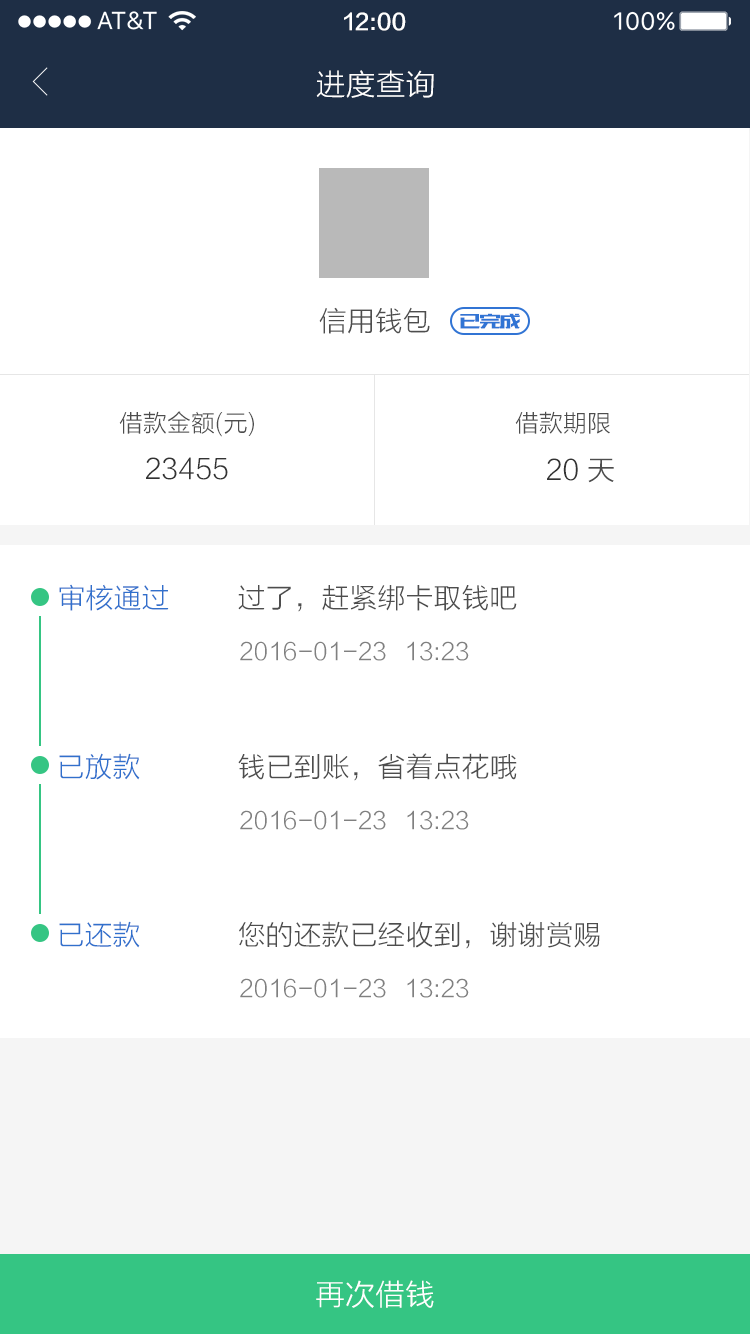
<style>
.page{position:relative;width:750px;height:1334px;background:#ffffff}
.page>*{position:absolute;margin:0}
.t1{font:22px "FZLTZHK--GBK1-0";color:#ffffff}
.t2{font:30px "FZLTXHK";color:#ffffff}
.t3{font:28px "FZLTXHK";color:#4d4d4d}
.t4{font:20px "MFBanHei_Noncommercial-Regular";color:#3174d4}
.t5{font:24px "FZLTXHK";color:#4d4d4d}
.t6{font:28px "FZLTXHK";color:#333333}
.t7{font:28px "FZLTXHK";color:#3170cc}
.t8{font:24px "FZLTXHK";color:#808080}
</style>
<div class="page">
<p class="t1" style="left:344px;top:12px;width:62px;height:19px">12:00</p>
<p class="t2" style="left:316px;top:70px;width:118px;height:28px">进度查询</p>
<p class="t3" style="left:319px;top:307px;width:111px;height:27px">信用钱包</p>
<p class="t4" style="left:460px;top:313px;width:60px;height:16px">已完成</p>
<p class="t5" style="left:119px;top:411px;width:135px;height:26px">借款金额(元)</p>
<p class="t5" style="left:515px;top:411px;width:95px;height:23px">借款期限</p>
<p class="t6" style="left:146px;top:457px;width:82px;height:23px">23455</p>
<p class="t6" style="left:547px;top:458px;width:31px;height:23px">20</p>
<p class="t3" style="left:588px;top:458px;width:26px;height:25px">天</p>
<p class="t7" style="left:59px;top:584px;width:110px;height:27px">审核通过</p>
<p class="t3" style="left:238px;top:585px;width:279px;height:27px">过了，赶紧绑卡取钱吧</p>
<p class="t8" style="left:240px;top:641px;width:146px;height:20px">2016-01-23</p>
<p class="t8" style="left:407px;top:641px;width:62px;height:20px">13:23</p>
<p class="t7" style="left:59px;top:753px;width:81px;height:27px">已放款</p>
<p class="t3" style="left:238px;top:753px;width:279px;height:28px">钱已到账，省着点花哦</p>
<p class="t8" style="left:240px;top:810px;width:146px;height:20px">2016-01-23</p>
<p class="t8" style="left:407px;top:810px;width:62px;height:20px">13:23</p>
<p class="t7" style="left:59px;top:921px;width:81px;height:27px">已还款</p>
<p class="t3" style="left:239px;top:921px;width:361px;height:28px">您的还款已经收到，谢谢赏赐</p>
<p class="t8" style="left:240px;top:978px;width:146px;height:20px">2016-01-23</p>
<p class="t8" style="left:407px;top:978px;width:62px;height:20px">13:23</p>
<p class="t2" style="left:316px;top:1280px;width:118px;height:28px">再次借钱</p>
</div>
